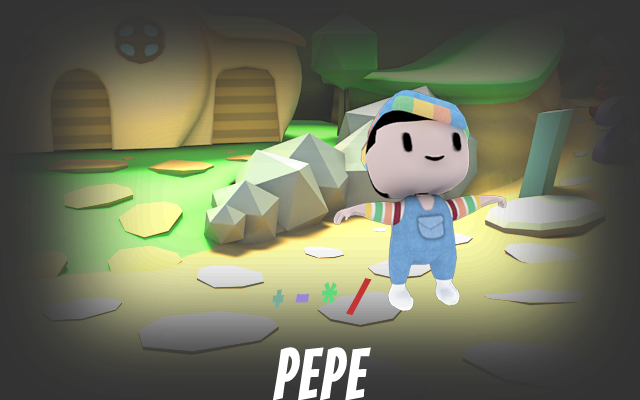
<style>
.page{position:relative;width:640px;height:400px}
.page>*{position:absolute;margin:0}
.t1{font:72px "Bangers-Regular";color:#ffffff;scale:0.8 1}
.t2{font:48px "Bangers-Regular";color:#79ad9a;scale:0.8 1}
.t3{font:48px "Bangers-Regular";color:#9887d6;scale:0.8 1}
.t4{font:48px "Bangers-Regular";color:#61d880;scale:0.8 1}
.t5{font:48px "Bangers-Regular";color:#c13535;scale:0.8 1}
</style>
<div class="page">
<p class="t1" style="left:272px;top:277px;width:100px;height:124px;text-align:center"><span class="t2">+ </span><span class="t3">- </span><span class="t4">* </span><span class="t5">/<br></span>PEPE</p>
</div>
